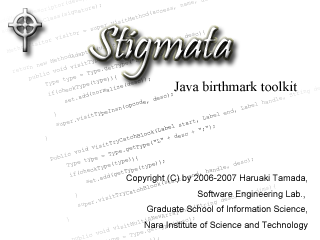
<style>
.page{position:relative;width:320px;height:240px;background:#ffffff}
.page>*{position:absolute;margin:0}
.t1{font:13.9px "TimesNewRomanPSMT";color:#000000}
.t2{font:9px "ArialMT";color:#000000}
</style>
<div class="page">
<p class="t1" style="left:174px;top:81px;width:124px;height:11px">Java birthmark toolkit</p>
<p class="t2" style="left:126px;top:174px;width:182px;height:56px;text-align:right">Copyright (C) by 2006-2007 Haruaki Tamada,<br>Software Engineering Lab., <br>Graduate School of Information Science,<br>Nara Institute of Science and Technology</p>
</div>
